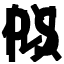
<style>
.page{position:relative;width:64px;height:64px;background:#000000}
.page>*{position:absolute;margin:0}
.t1{font:60px "MicrosoftYaHei";color:#000000;font-weight:bold}
.t2{font:72px "Consolas-Bold";color:#000000;font-weight:bold;scale:0.7 1}
</style>
<div class="page">
<p class="t1" style="left:1px;top:4px;width:61px;height:58px">似</p>
<p class="t2" style="left:6px;top:7px;width:53px;height:49px">PS</p>
</div>
